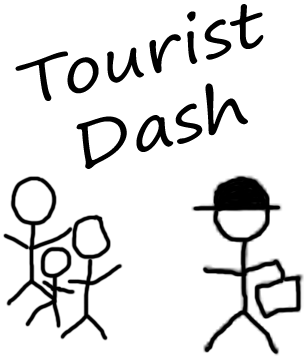
<style>
.page{position:relative;width:304px;height:356px;background:#ffffff}
.page>*{position:absolute;margin:0}
.t1{font:61.8px "SegoePrint";color:#000000;scale:1.17 1}
</style>
<div class="page">
<p class="t1" style="left:15px;top:4px;width:249px;height:165px;text-align:center;rotate:-15deg">Tourist<br>Dash</p>
</div>
